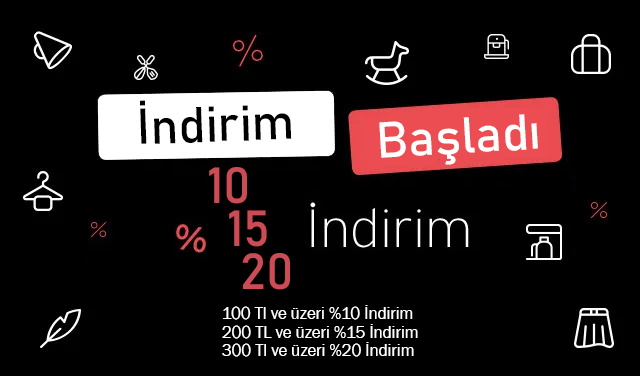
<style>
.page{position:relative;width:640px;height:376px;background:#000000}
.page>*{position:absolute;margin:0}
.t1{font:12px "Bahnschrift";color:#000000}
.t2{font:12px "Bahnschrift";color:#fffefe}
.t3{font:12px "Bahnschrift";color:#cb4c55}
.t4{font:16.7px/18.8px "FranklinGothic-Book";color:#ffffff}
</style>
<div class="page">
<p class="t1" style="left:140px;top:100px;width:152px;height:44px;rotate:-2deg">İndirim</p>
<p class="t2" style="left:379px;top:114px;width:159px;height:51px;rotate:-3deg">Başladı</p>
<p class="t3" style="left:209px;top:167px;width:38px;height:37px">10</p>
<p class="t3" style="left:229px;top:210px;width:38px;height:37px">15</p>
<p class="t3" style="left:242px;top:253px;width:48px;height:37px">20</p>
<p class="t4" style="left:222px;top:305px;width:196px;height:52px">100 Tl ve üzeri %10 İndirim<br>200 TL ve üzeri %15 İndirim<br>300 Tl ve üzeri %20 İndirim</p>
</div>
